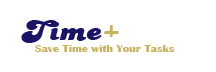
<style>
.page{position:relative;width:216px;height:72px;background:#ffffff}
.page>*{position:absolute;margin:0}
.t1{font:10px "BritannicBold";color:#c7b162;scale:1.19 1}
.t2{font:30px "PT-BananaSplit";color:#1b1464;scale:1.19 1}
.t3{font:30px "PT-BananaSplit";color:#c7b162;scale:1.19 1}
</style>
<div class="page">
<p class="t1" style="left:21px;top:20px;width:154px;height:32px"><span class="t2">Time</span><span class="t3">+<br>    </span>Save Time with Your Tasks</p>
</div>
